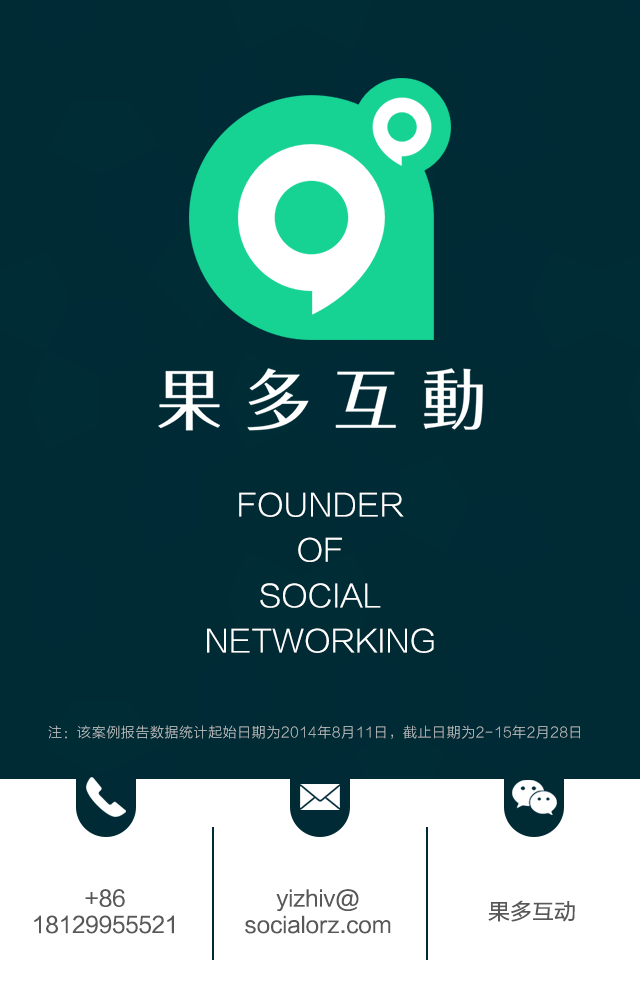
<style>
.page{position:relative;width:640px;height:1008px;background:#002b35}
.page>*{position:absolute;margin:0}
.t1{font:30.9px/45.1px "FZLTKHK--GBK1-0";color:#ffffff}
.t2{font:30.9px/45.2px "FZLTKHK--GBK1-0";color:#ffffff}
.t3{font:30.9px/45.7px "FZLTKHK--GBK1-0";color:#ffffff}
.t4{font:14px "FZLTKHK--GBK1-0";letter-spacing:0.04em;color:#c4c7c8}
.t5{font:22px "FZLTHK--GBK1-0";color:#585858}
</style>
<div class="page">
<p class="t1" style="left:207px;top:492px;width:227px;height:161px;text-align:center"><span class="t2">FOUNDER<br></span><span class="t2">OF<br></span><span class="t3">SOCIAL<br></span>NETWORKING</p>
<p class="t4" style="left:48px;top:725px;width:532px;height:14px">注：该案例报告数据统计起始日期为2014年8月11日，截止日期为2-15年2月28日</p>
<p class="t5" style="left:34px;top:889px;width:140px;height:45px;text-align:center">+86<br>18129955521</p>
<p class="t5" style="left:245px;top:889px;width:146px;height:45px;text-align:center">yizhiv@<br>socialorz.com</p>
<p class="t5" style="left:488px;top:900px;width:87px;height:22px">果多互动</p>
</div>
